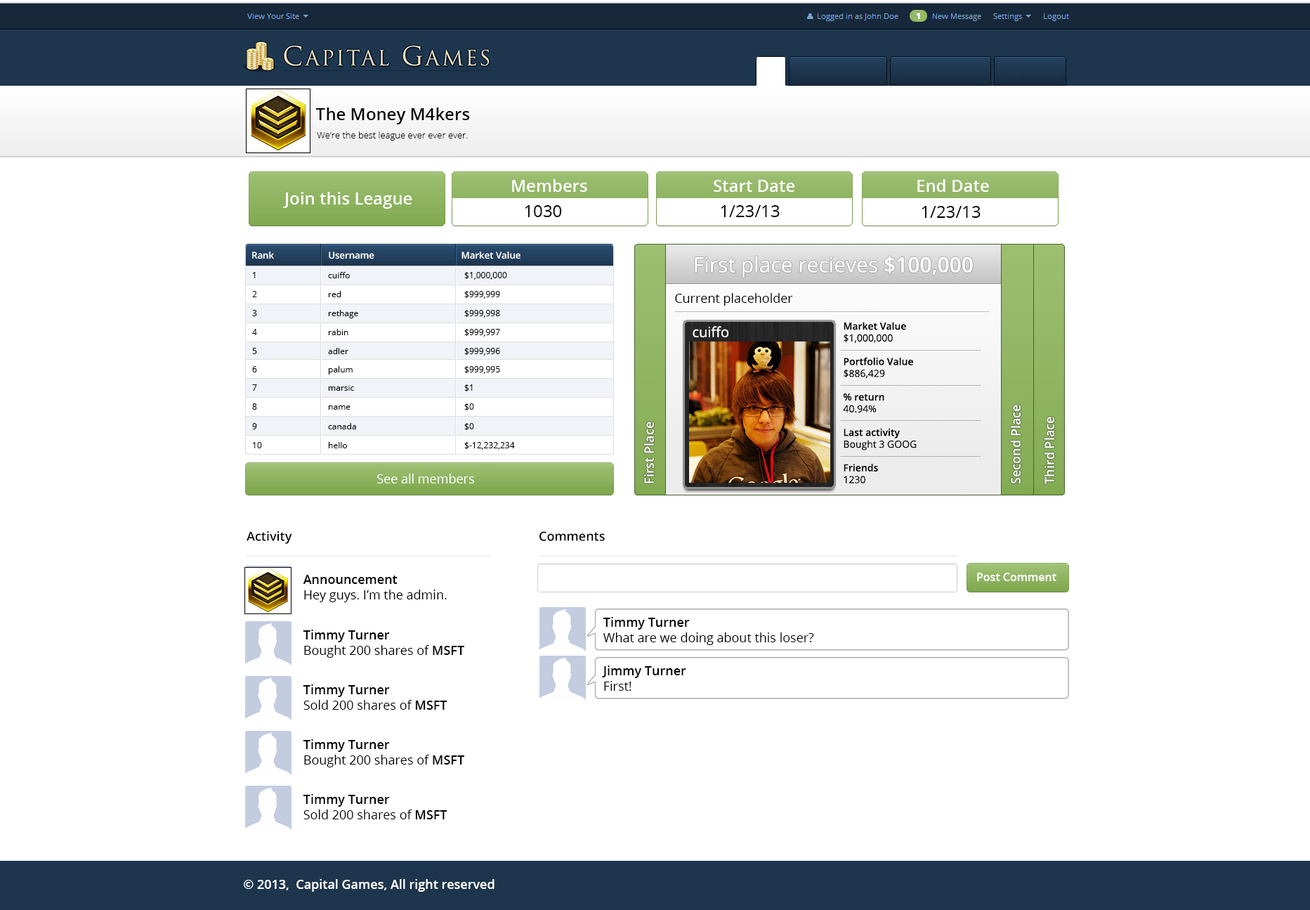
<style>
.page{position:relative;width:1310px;height:910px;background:#ffffff}
.page>*{position:absolute;margin:0}
.t1{font:16.9px "OpenSans-Semibold";color:#000000}
.t2{font:9.1px "OpenSans-Light";color:#000000}
.t3{font:16.9px "OpenSans-Semibold";color:#ffffff}
.t4{font:16.9px "OpenSans";color:#000000}
.t5{font:9.3px "OpenSans-Semibold";color:#ffffff}
.t6{font:21.1px "OpenSans";color:#ffffff}
.t7{font:21.1px "OpenSans-Semibold";color:#ffffff}
.t8{font:8.4px "OpenSans";color:#000000}
.t9{font:12.6px "OpenSans";color:#000000}
.t10{font:14.1px "OpenSans";color:#ffffff}
.t11{font:9.8px "OpenSans-Semibold";color:#000000}
.t12{font:9.8px "OpenSans";color:#000000}
.t13{font:13px "OpenSans-Semibold";color:#ffffff}
.t14{font:12.6px "OpenSans";color:#ffffff}
.t15{font:12.6px "OpenSans-Semibold";color:#000000}
.t16{font:11.2px "OpenSans-Semibold";color:#ffffff}
.t17{font:12.6px "OpenSans-Semibold";color:#ffffff}
</style>
<div class="page">
<p class="t1" style="left:315px;top:108px;width:155px;height:16px">The Money M4kers</p>
<p class="t2" style="left:317px;top:131px;width:151px;height:10px">We’re the best league ever ever ever.</p>
<p class="t3" style="left:512px;top:179px;width:75px;height:13px">Members</p>
<p class="t3" style="left:714px;top:180px;width:81px;height:12px">Start Date</p>
<p class="t3" style="left:918px;top:179px;width:71px;height:13px">End Date</p>
<p class="t3" style="left:283px;top:192px;width:129px;height:17px">Join this League</p>
<p class="t4" style="left:525px;top:205px;width:37px;height:12px">1030</p>
<p class="t4" style="left:721px;top:205px;width:59px;height:12px">1/23/13</p>
<p class="t4" style="left:922px;top:206px;width:59px;height:12px">1/23/13</p>
<p class="t5" style="left:252px;top:251px;width:22px;height:8px">Rank</p>
<p class="t5" style="left:329px;top:252px;width:46px;height:7px">Username</p>
<p class="t5" style="left:462px;top:251px;width:59px;height:8px">Market Value</p>
<p class="t6" style="left:695px;top:256px;width:278px;height:22px">First place recieves <span class="t7">$100,000</span></p>
<p class="t8" style="left:253px;top:272px;width:3px;height:6px">1</p>
<p class="t8" style="left:328px;top:272px;width:22px;height:6px">cuiffo</p>
<p class="t8" style="left:464px;top:272px;width:43px;height:8px">$1,000,000</p>
<p class="t8" style="left:252px;top:291px;width:5px;height:6px">2</p>
<p class="t8" style="left:328px;top:291px;width:13px;height:6px">red</p>
<p class="t8" style="left:464px;top:291px;width:36px;height:8px">$999,999</p>
<p class="t9" style="left:675px;top:293px;width:118px;height:13px">Current placeholder</p>
<p class="t8" style="left:252px;top:310px;width:5px;height:6px">3</p>
<p class="t8" style="left:328px;top:310px;width:30px;height:8px">rethage</p>
<p class="t8" style="left:464px;top:310px;width:36px;height:8px">$999,998</p>
<p class="t8" style="left:252px;top:329px;width:5px;height:6px">4</p>
<p class="t8" style="left:328px;top:329px;width:21px;height:6px">rabin</p>
<p class="t8" style="left:464px;top:329px;width:36px;height:8px">$999,997</p>
<p class="t10" style="left:693px;top:326px;width:36px;height:11px">cuiffo</p>
<p class="t11" style="left:843px;top:322px;width:74px;height:161px">Market Value<br><span class="t12">$1,000,000<br><br></span>Portfolio Value<br><span class="t12">$886,429<br><br></span>% return<br><span class="t12">40.94%<br><br></span>Last activity<br><span class="t12">Bought 3 GOOG<br><br></span>Friends<br><span class="t12">1230</span></p>
<p class="t8" style="left:252px;top:348px;width:5px;height:6px">5</p>
<p class="t8" style="left:328px;top:348px;width:21px;height:6px">adler</p>
<p class="t8" style="left:464px;top:348px;width:36px;height:8px">$999,996</p>
<p class="t8" style="left:252px;top:366px;width:5px;height:6px">6</p>
<p class="t8" style="left:328px;top:366px;width:25px;height:9px">palum</p>
<p class="t8" style="left:464px;top:366px;width:36px;height:8px">$999,995</p>
<p class="t8" style="left:252px;top:384px;width:5px;height:7px">7</p>
<p class="t8" style="left:328px;top:385px;width:26px;height:6px">marsic</p>
<p class="t8" style="left:464px;top:384px;width:9px;height:7px">$1</p>
<p class="t8" style="left:252px;top:403px;width:5px;height:7px">8</p>
<p class="t8" style="left:328px;top:405px;width:23px;height:5px">name</p>
<p class="t8" style="left:464px;top:403px;width:10px;height:7px">$0</p>
<p class="t13" style="left:1010px;top:405px;width:12px;height:79px;rotate:-90deg">Second Place</p>
<p class="t8" style="left:252px;top:423px;width:5px;height:6px">9</p>
<p class="t8" style="left:328px;top:423px;width:28px;height:6px">canada</p>
<p class="t8" style="left:464px;top:423px;width:10px;height:7px">$0</p>
<p class="t13" style="left:644px;top:422px;width:11px;height:61px;rotate:-90deg">First Place</p>
<p class="t13" style="left:1044px;top:417px;width:11px;height:67px;rotate:-90deg">Third Place</p>
<p class="t8" style="left:253px;top:442px;width:9px;height:6px">10</p>
<p class="t8" style="left:328px;top:442px;width:19px;height:6px">hello</p>
<p class="t8" style="left:464px;top:442px;width:51px;height:8px">$-12,232,234</p>
<p class="t14" style="left:377px;top:474px;width:97px;height:9px">See all members</p>
<p class="t15" style="left:247px;top:531px;width:45px;height:13px">Activity</p>
<p class="t15" style="left:540px;top:531px;width:65px;height:10px">Comments</p>
<p class="t9" style="left:303px;top:575px;width:144px;height:27px"><span class="t15">Announcement<br></span>Hey guys. I’m the admin.</p>
<p class="t16" style="left:977px;top:573px;width:80px;height:8px">Post Comment</p>
<p class="t9" style="left:603px;top:617px;width:211px;height:28px"><span class="t15">Timmy Turner</span> <br>What are we doing about this loser?</p>
<p class="t9" style="left:303px;top:630px;width:161px;height:28px"><span class="t15">Timmy Turner</span> <br>Bought 200 shares of <span class="t15">MSFT</span></p>
<p class="t15" style="left:602px;top:665px;width:84px;height:26px">Jimmy Turner<br><span class="t9">First!</span></p>
<p class="t9" style="left:303px;top:684px;width:145px;height:26px"><span class="t15">Timmy Turner</span> <br>Sold 200 shares of <span class="t15">MSFT</span></p>
<p class="t9" style="left:303px;top:739px;width:161px;height:28px"><span class="t15">Timmy Turner</span> <br>Bought 200 shares of <span class="t15">MSFT</span></p>
<p class="t9" style="left:303px;top:794px;width:145px;height:25px"><span class="t15">Timmy Turner</span> <br>Sold 200 shares of <span class="t15">MSFT</span></p>
<p class="t17" style="left:244px;top:879px;width:251px;height:13px">© 2013,  Capital Games, All right reserved</p>
</div>
